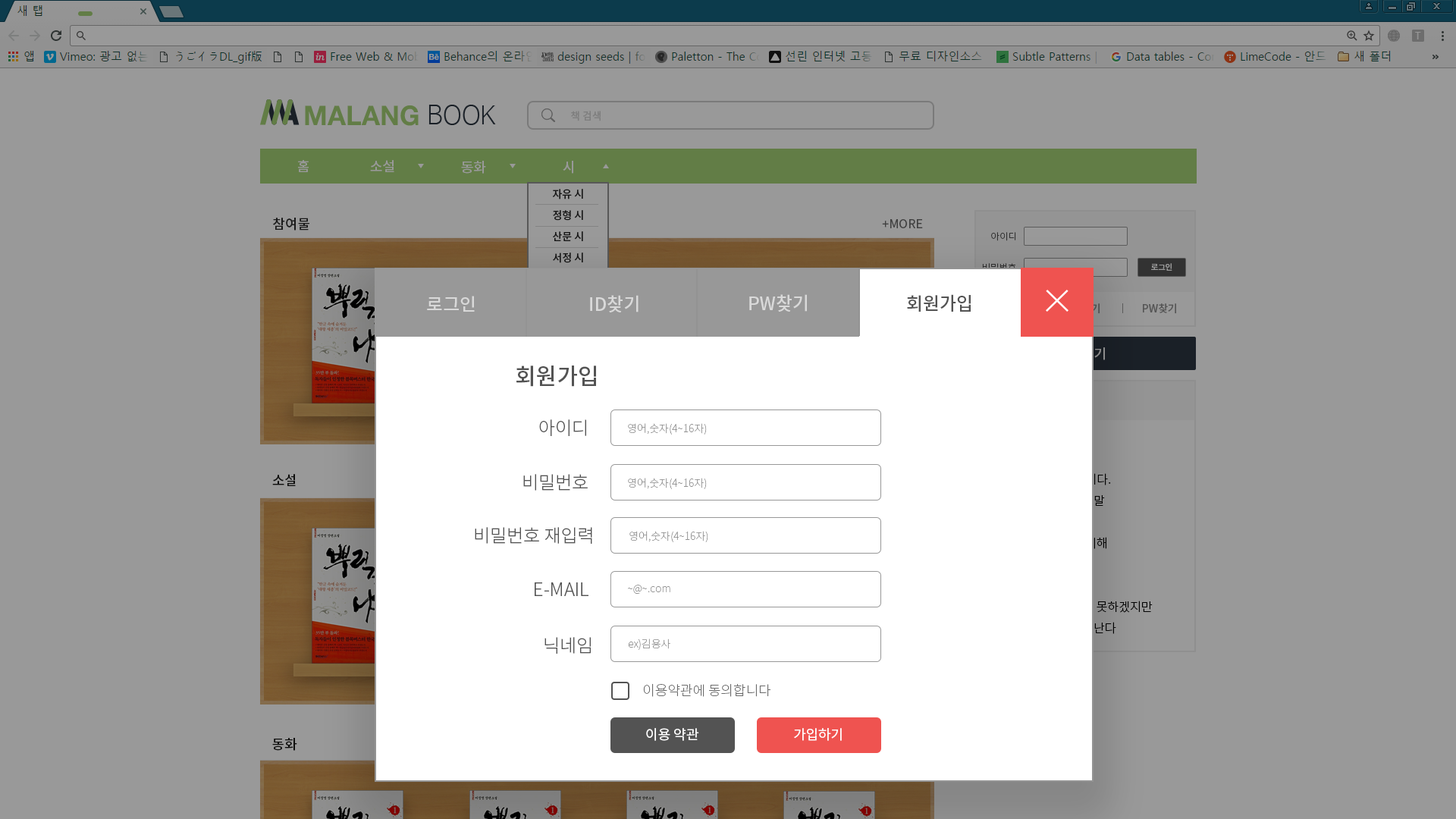
<style>
.page{position:relative;width:1456px;height:819px;background:#999999}
.page>*{position:absolute;margin:0}
.t1{font:18.2px "NotoSansCJKkr-Medium";color:#d9d9d9}
.t2{font:18.2px "NotoSansCJKkr-Medium";color:#535353}
.t3{font:22.7px "NotoSansCJKkr-Medium";color:#535353}
.t4{font:18.2px "NotoSansCJKkr-Light";color:#535353}
.t5{font:10.6px "NotoSansCJKkr-Thin";color:#939393}
.t6{font:13.6px "NotoSansCJKkr-Thin";color:#535353}
.t7{font:13.6px "NotoSansCJKkr-Regular";color:#ffffff}
</style>
<div class="page">
<p class="t1" style="left:427px;top:296px;width:48px;height:16px">로그인</p>
<p class="t1" style="left:590px;top:295px;width:49px;height:17px">ID찾기</p>
<p class="t1" style="left:749px;top:294px;width:58px;height:18px">PW찾기</p>
<p class="t2" style="left:907px;top:294px;width:64px;height:18px">회원가입</p>
<p class="t3" style="left:516px;top:366px;width:80px;height:21px">회원가입</p>
<p class="t4" style="left:539px;top:419px;width:47px;height:17px">아이디</p>
<p class="t5" style="left:628px;top:423px;width:79px;height:12px">영어,숫자(4~16자)</p>
<p class="t4" style="left:523px;top:474px;width:65px;height:17px">비밀번호</p>
<p class="t5" style="left:628px;top:478px;width:79px;height:11px">영어,숫자(4~16자)</p>
<p class="t4" style="left:475px;top:527px;width:117px;height:17px">비밀번호 재입력</p>
<p class="t5" style="left:629px;top:531px;width:79px;height:11px">영어,숫자(4~16자)</p>
<p class="t4" style="left:535px;top:582px;width:53px;height:14px">E-MAIL</p>
<p class="t5" style="left:628px;top:585px;width:42px;height:9px">~@~.com</p>
<p class="t4" style="left:544px;top:637px;width:47px;height:17px">닉네임</p>
<p class="t5" style="left:628px;top:639px;width:42px;height:11px">ex)김용사</p>
<p class="t6" style="left:643px;top:683px;width:127px;height:14px;opacity:0.9">이용약관에 동의합니다</p>
<p class="t7" style="left:646px;top:728px;width:53px;height:13px">이용 약관</p>
<p class="t7" style="left:794px;top:728px;width:48px;height:13px">가입하기</p>
</div>
